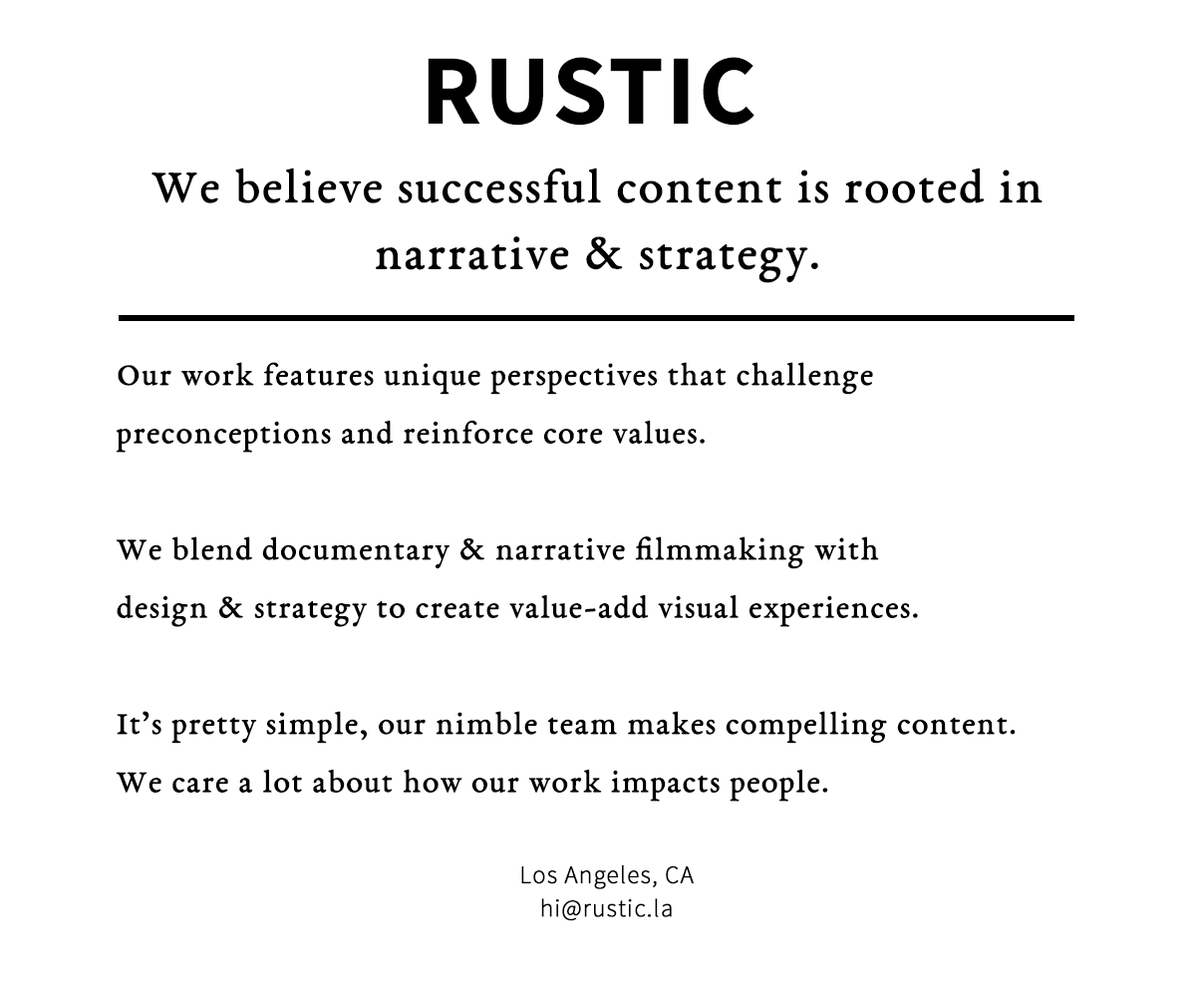
<style>
.page{position:relative;width:1196px;height:997px;background:#ffffff}
.page>*{position:absolute;margin:0}
.t1{font:99.7px "SourceSansPro-Bold";letter-spacing:0.025em;color:#000000;text-transform:uppercase}
.t2{font:49.8px/66.5px "EBGaramond08-Regular";letter-spacing:0.025em;color:#000000;font-weight:bold}
.t3{font:33.2px/58.1px "EBGaramond08-Regular";letter-spacing:0.025em;color:#000000;font-weight:bold}
.t4{font:24.9px/33.2px "SourceSansPro-Light";letter-spacing:0.025em;color:#000000;font-weight:bold}
</style>
<div class="page">
<p class="t1" style="left:428px;top:57px;width:327px;height:69px">RUSTIC</p>
<p class="t2" style="left:152px;top:167px;width:891px;height:116px;text-align:center">We believe successful content is rooted in<br>narrative &amp; strategy.</p>
<p class="t3" style="left:116px;top:362px;width:900px;height:439px">Our work features unique perspectives that challenge <br>preconceptions and reinforce core values.<br><br>We blend documentary &amp; narrative filmmaking with<br>design &amp; strategy to create value-add visual experiences.<br><br>It’s pretty simple, our nimble team makes compelling content.<br>We care a lot about how our work impacts people.</p>
<p class="t4" style="left:521px;top:864px;width:173px;height:57px;text-align:center">Los Angeles, CA<br>hi@rustic.la</p>
</div>
